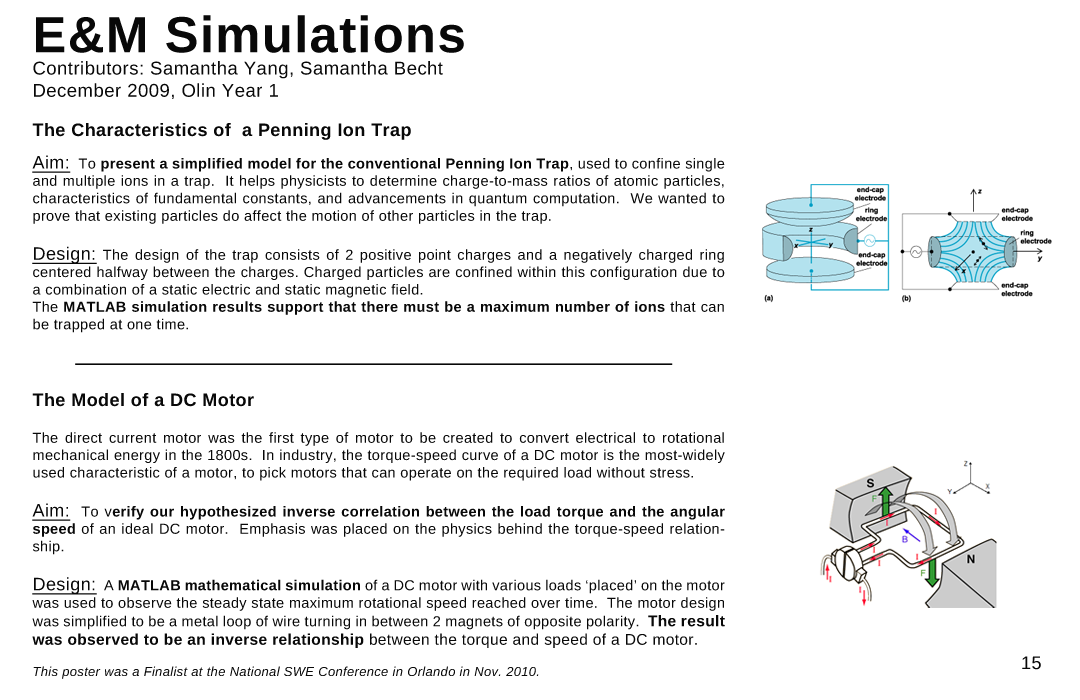
<style>
.page{position:relative;width:1080px;height:700px;background:#ffffff}
.page>*{position:absolute;margin:0}
.t1{font:18.5px "LiberationSans";letter-spacing:0.025em;color:#080808}
.t2{font:50.9px "LiberationSans-Bold";letter-spacing:0.025em;color:#080808}
.t3{font:14.5px "LiberationSans";letter-spacing:0.025em;color:#080808}
.t4{font:18px "LiberationSans-Bold";letter-spacing:0.025em;color:#080808}
.t5{font:18px "LiberationSans";letter-spacing:0.025em;color:#080808;text-decoration:underline}
.t6{font:14.5px "LiberationSans-Bold";letter-spacing:0.025em;color:#080808}
.t7{font:15.5px "LiberationSans-Bold";letter-spacing:0.025em;color:#080808}
.t8{font:15.5px "LiberationSans";letter-spacing:0.025em;color:#080808}
.t9{font:13px "LiberationSans-Italic";letter-spacing:0.025em;color:#080808}
.t10{font:18px "LiberationSans";letter-spacing:0.025em;color:#080808}
</style>
<div class="page">
<p class="t1" style="left:33px;top:15px;width:431px;height:84px;text-align:justify"><span class="t2">E&amp;M Simulations<br></span>Contributors: Samantha Yang, Samantha Becht<br>December 2009, Olin Year 1</p>
<p class="t3" style="left:32px;top:123px;width:693px;height:556px;text-align:justify"><span class="t4">The Characteristics of  a Penning Ion Trap<br><br></span><span class="t5">Aim:</span>  To <span class="t6">present a simplified model for the conventional Penning Ion Trap</span>, used to confine single and multiple ions in a trap.  It helps physicists to determine charge-to-mass ratios of atomic particles, characteristics of fundamental constants, and advancements in quantum computation.  We wanted to prove that existing particles do affect the motion of other particles in the trap.<br><br><span class="t5">Design:</span> The design of the trap consists of 2 positive point charges and a negatively charged ring centered halfway between the charges. Charged particles are confined within this configuration due to a combination of a static electric and static magnetic field.   <br>The <span class="t6">MATLAB simulation results support that there must be a maximum number of ions </span>that can be trapped at one time.<br><br><br><br><span class="t4">The Model of a DC Motor<br><br></span>The direct current motor was the first type of motor to be created to convert electrical to rotational mechanical energy in the 1800s.  In industry, the torque-speed curve of a DC motor is the most-widely used characteristic of a motor, to pick motors that can operate on the required load without stress.<br><br><span class="t5">Aim:</span>  To v<span class="t6">erify our hypothesized inverse correlation between the load torque and the angular speed </span>of an ideal DC motor.  Emphasis was placed on the physics behind the torque-speed relationship.<br><br><span class="t5">Design:</span>  A <span class="t6">MATLAB mathematical simulation</span> of a DC motor with various loads ‘placed’ on the motor was used to observe the steady state maximum rotational speed reached over time.  The motor design was simplified to be a metal loop of wire turning in between 2 magnets of opposite polarity.  <span class="t7">The result was observed to be an inverse relationship</span><span class="t8"> between the torque and speed of a DC motor.<br><br></span><span class="t9">This poster was a Finalist at the National SWE Conference in Orlando in Nov. 2010.</span></p>
<p class="t10" style="left:1022px;top:656px;width:19px;height:14px">15</p>
</div>
